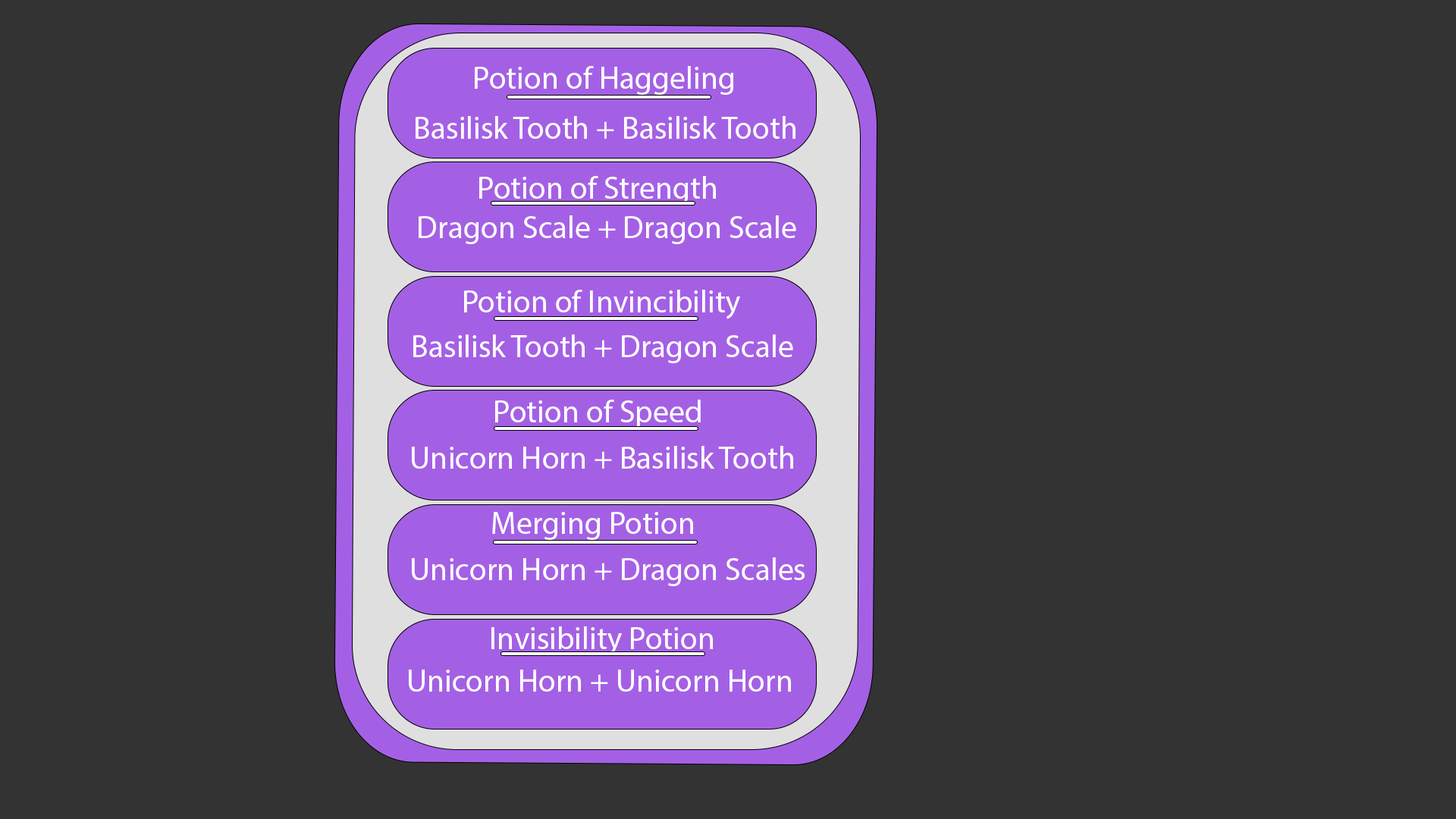
<style>
.page{position:relative;width:1456px;height:819px;background:#333333}
.page>*{position:absolute;margin:0}
.t1{font:31.6px "MyriadPro-Regular";color:#ffffff}
</style>
<div class="page">
<p class="t1" style="left:475px;top:66px;width:259px;height:29px">Potion of Haggeling</p>
<p class="t1" style="left:416px;top:116px;width:379px;height:23px">Basilisk Tooth + Basilisk Tooth</p>
<p class="t1" style="left:479px;top:176px;width:237px;height:29px">Potion of Strength</p>
<p class="t1" style="left:419px;top:215px;width:377px;height:29px">Dragon Scale + Dragon Scale</p>
<p class="t1" style="left:464px;top:290px;width:276px;height:29px">Potion of Invincibility</p>
<p class="t1" style="left:413px;top:334px;width:380px;height:29px">Basilisk Tooth + Dragon Scale</p>
<p class="t1" style="left:495px;top:400px;width:206px;height:28px">Potion of Speed</p>
<p class="t1" style="left:412px;top:446px;width:381px;height:23px">Unicorn Horn + Basilisk Tooth</p>
<p class="t1" style="left:492px;top:512px;width:201px;height:28px">Merging Potion</p>
<p class="t1" style="left:412px;top:557px;width:393px;height:29px">Unicorn Horn + Dragon Scales</p>
<p class="t1" style="left:491px;top:626px;width:222px;height:30px">Invisibility Potion</p>
<p class="t1" style="left:409px;top:670px;width:382px;height:22px">Unicorn Horn + Unicorn Horn</p>
</div>
